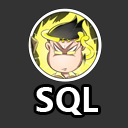
<style>
.page{position:relative;width:128px;height:128px;background:#333333}
.page>*{position:absolute;margin:0}
.t1{font:32.1px "MicrosoftYaHei-Bold";color:#ffffff}
</style>
<div class="page">
<p class="t1" style="left:36px;top:87px;width:62px;height:28px">SQL</p>
</div>
